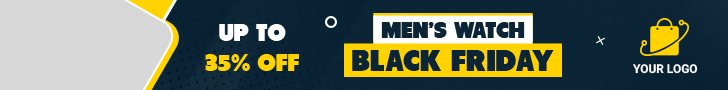
<style>
.page{position:relative;width:728px;height:90px;background:#0c2536}
.page>*{position:absolute;margin:0}
.t1{font:23.7px/30px "Tondu-Beta";color:#ffd200}
.t2{font:23.7px/30px "Tondu-Beta";color:#ffffff}
.t3{font:22.6px "Tondu-Beta";color:#0c2536}
.t4{font:30.5px "Tondu-Beta";color:#0c2536}
.t5{font:12.1px "Heebo-Bold";color:#ffffff}
</style>
<div class="page">
<p class="t1" style="left:205px;top:24px;width:94px;height:47px;text-align:center"><span class="t2">UP TO<br></span>35% OFF</p>
<p class="t3" style="left:381px;top:22px;width:144px;height:16px">MEN’S WATCH</p>
<p class="t4" style="left:352px;top:50px;width:202px;height:21px">BLACK FRIDAY</p>
<p class="t5" style="left:633px;top:64px;width:65px;height:10px">YOUR LOGO</p>
</div>
